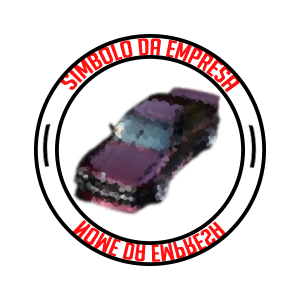
<style>
.page{position:relative;width:300px;height:300px;background:#ffffff}
.page>*{position:absolute;margin:0}
.t1{font:23.1px "BigNoodleTitling";color:#ff1111;scale:1.05 1}
.t2{font:23.2px "BigNoodleTitling";color:#ff1111;scale:1.04 1}
</style>
<div class="page">
<p class="t1" style="left:60px;top:38px;width:180px;height:55px;rotate:1deg">simbolo da empresa</p>
<p class="t2" style="left:72px;top:220px;width:154px;height:42px;rotate:1deg">nome da empresa</p>
</div>
